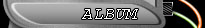
<style>
.page{position:relative;width:205px;height:28px}
.page>*{position:absolute;margin:0}
.t1{font:18px "CourierNewPS-ItalicMT";color:#ffffff}
</style>
<div class="page">
<p class="t1" style="left:82px;top:9px;width:56px;height:10px">ALBUM</p>
</div>
